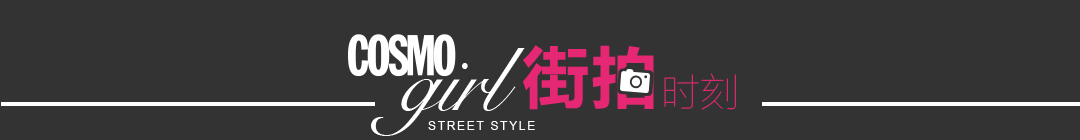
<style>
.page{position:relative;width:1080px;height:140px;background:#333333}
.page>*{position:absolute;margin:0}
.t1{font:70px "FZLTCHJW--GB1-0";color:#e52774;text-transform:uppercase}
.t2{font:40px "FZLTCXHJW--GB1-0";color:#e52774;text-transform:uppercase}
.t3{font:12px "ArialMT";letter-spacing:0.14em;color:#ffffff;text-transform:uppercase}
</style>
<div class="page">
<p class="t1" style="left:523px;top:45px;width:131px;height:65px">街拍</p>
<p class="t2" style="left:664px;top:73px;width:72px;height:37px">时刻</p>
<p class="t3" style="left:428px;top:121px;width:107px;height:9px">STREET STYLE</p>
</div>
